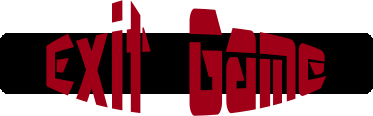
<style>
.page{position:relative;width:373px;height:116px;background:#ffffff}
.page>*{position:absolute;margin:0}
.t1{font:60px "ARDESTINE";color:#9f0017}
</style>
<div class="page">
<p class="t1" style="left:46px;top:0px;width:281px;height:116px;text-align:center">Exit Game</p>
</div>
